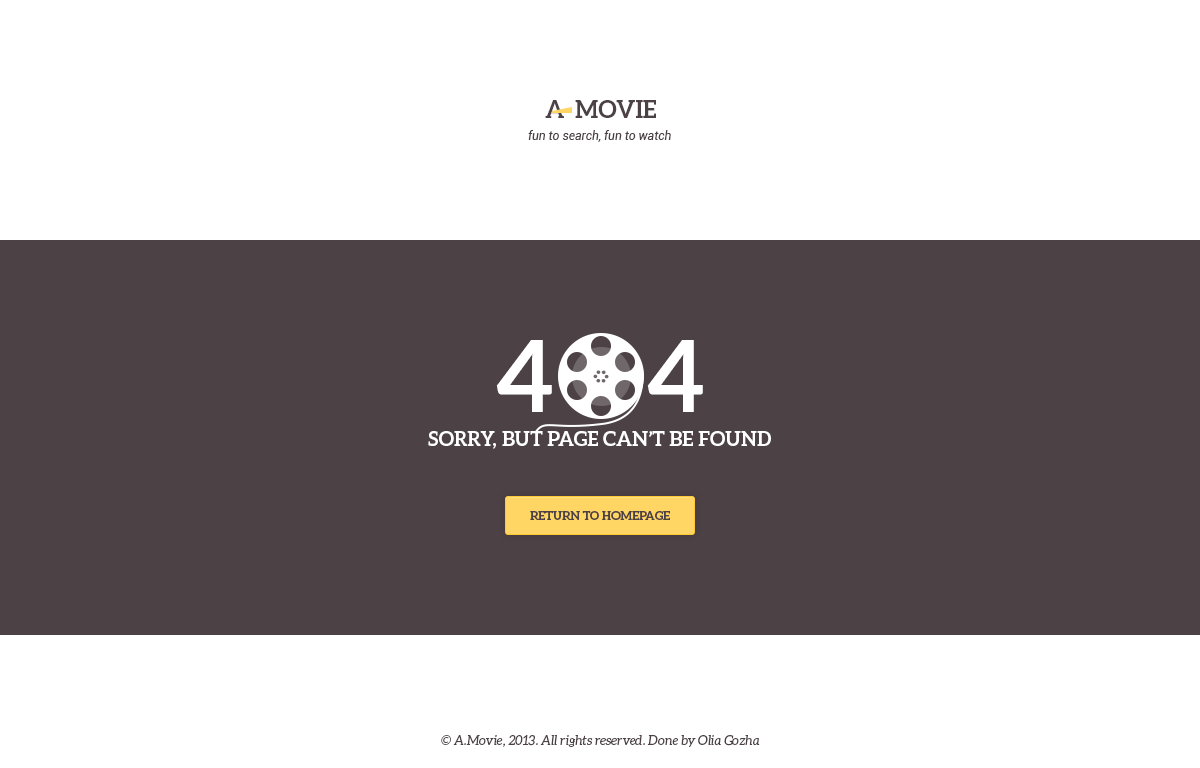
<style>
.page{position:relative;width:1200px;height:768px;background:#4c4145}
.page>*{position:absolute;margin:0}
.t1{font:24px "Aleo-Bold";color:#4c4145;text-transform:uppercase}
.t2{font:12px "Roboto-Italic";color:#4c4145}
.t3{font:100px "Aleo-Bold";color:#ffffff;text-transform:uppercase}
.t4{font:20px "Aleo-Bold";color:#ffffff;text-transform:uppercase}
.t5{font:12px "Aleo-Bold";color:#4c4145;text-transform:uppercase}
.t6{font:13px "Aleo-Italic";color:#4c4145}
</style>
<div class="page">
<p class="t1" style="left:545px;top:100px;width:19px;height:18px">A</p>
<p class="t1" style="left:575px;top:100px;width:81px;height:18px">movie</p>
<p class="t2" style="left:528px;top:130px;width:143px;height:12px">fun to search, fun to watch</p>
<p class="t3" style="left:496px;top:340px;width:207px;height:72px">4    4</p>
<p class="t4" style="left:428px;top:431px;width:343px;height:18px">sorry, but page can’t be found</p>
<p class="t5" style="left:530px;top:511px;width:140px;height:9px">return to homepage</p>
<p class="t6" style="left:441px;top:735px;width:319px;height:12px">© A.Movie, 2013. All rights reserved. Done by Olia Gozha</p>
</div>
